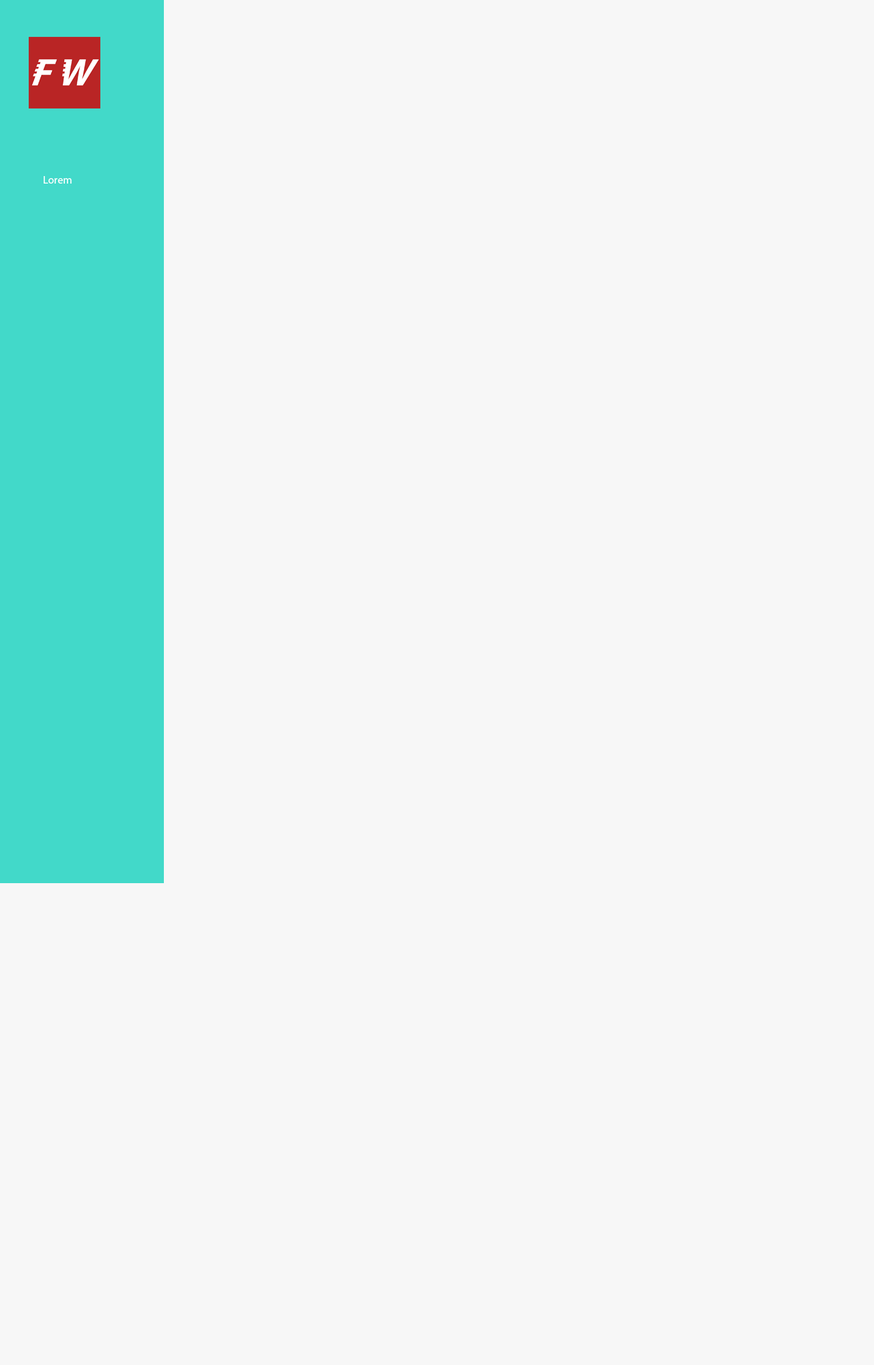
<style>
.page{position:relative;width:874px;height:1365px;background:#f7f7f7}
.page>*{position:absolute;margin:0}
.t1{font:10.9px "MyriadPro-Regular";color:#ffffff}
</style>
<div class="page">
<p class="t1" style="left:44px;top:176px;width:28px;height:8px">Lorem</p>
</div>
